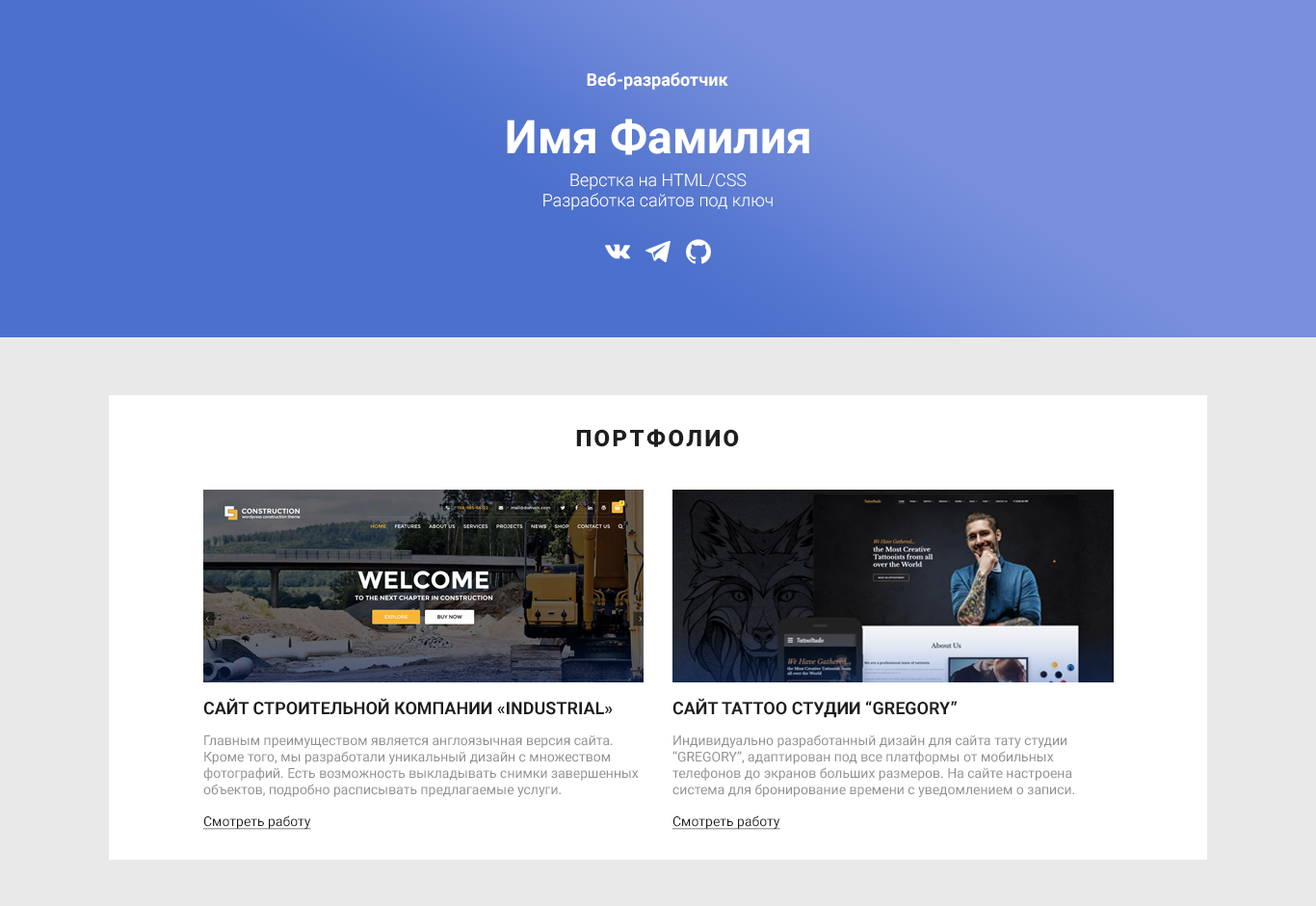
<style>
.page{position:relative;width:1316px;height:906px;background:#ffffff}
.page>*{position:absolute;margin:0}
.t1{font:17.3px "Roboto-Bold";color:#ffffff}
.t2{font:46.3px "Roboto-Bold";color:#ffffff}
.t3{font:17.3px "Roboto-Light";color:#ffffff}
.t4{font:23.1px "Roboto-Black";letter-spacing:0.1em;color:#1f1f1f;text-transform:uppercase}
.t5{font:17.3px "Roboto-Bold";color:#1e1e1e;text-transform:uppercase}
.t6{font:13.5px "Roboto-Regular";color:#8f8f8f}
.t7{font:13.5px "Roboto-Regular";color:#1e1e1e;text-decoration:underline}
</style>
<div class="page">
<p class="t1" style="left:587px;top:72px;width:142px;height:18px">Веб-разработчик</p>
<p class="t2" style="left:507px;top:119px;width:302px;height:36px">Имя Фамилия</p>
<p class="t3" style="left:544px;top:173px;width:229px;height:37px;text-align:center">Верстка на HTML/CSS<br>Разработка сайтов под ключ</p>
<p class="t4" style="left:576px;top:429px;width:163px;height:18px">Портфолио</p>
<p class="t5" style="left:203px;top:698px;width:410px;height:17px">Сайт строительной компании «INDustrial»</p>
<p class="t5" style="left:673px;top:698px;width:284px;height:20px">Сайт tattoo СТУДИИ “gregory”</p>
<p class="t6" style="left:203px;top:735px;width:436px;height:62px">Главным преимуществом является англоязычная версия сайта. Кроме того, мы разработали уникальный дизайн с множеством фотографий. Есть возможность выкладывать снимки завершенных объектов, подробно расписывать предлагаемые услуги.</p>
<p class="t6" style="left:673px;top:734px;width:401px;height:63px">Индивидуально разработанный дизайн для сайта тату студии “GREGORY”, адаптирован под все платформы от мобильных телефонов до экранов больших размеров. На сайте настроена система для бронирование времени с уведомлением о записи.</p>
<p class="t7" style="left:202px;top:815px;width:109px;height:15px">Смотреть работу</p>
<p class="t7" style="left:672px;top:815px;width:109px;height:15px">Смотреть работу</p>
</div>
